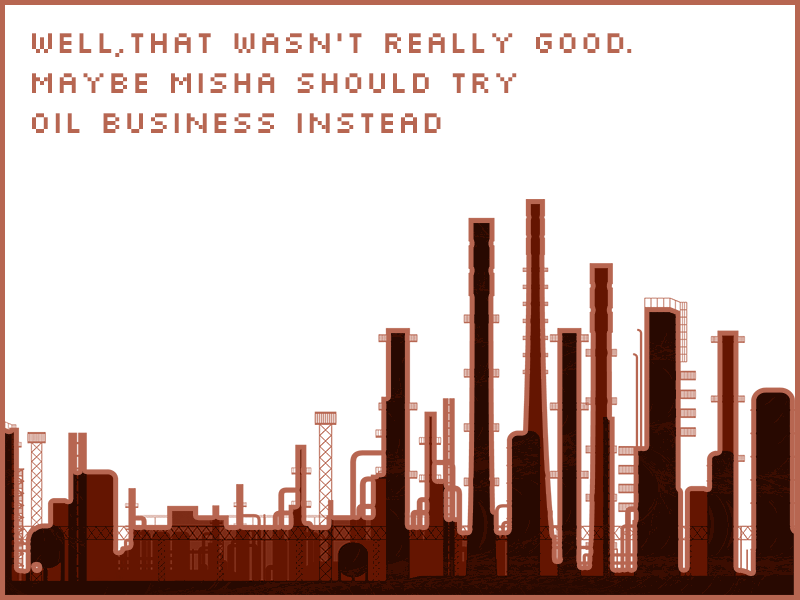
<style>
.page{position:relative;width:800px;height:600px;background:#ffffff}
.page>*{position:absolute;margin:0}
.t1{font:33.3px "Silkscreen";color:#b76651}
</style>
<div class="page">
<p class="t1" style="left:32px;top:33px;width:600px;height:100px">well,that wasn't really good.<br>maybe misha should try<br>oil business instead</p>
</div>
